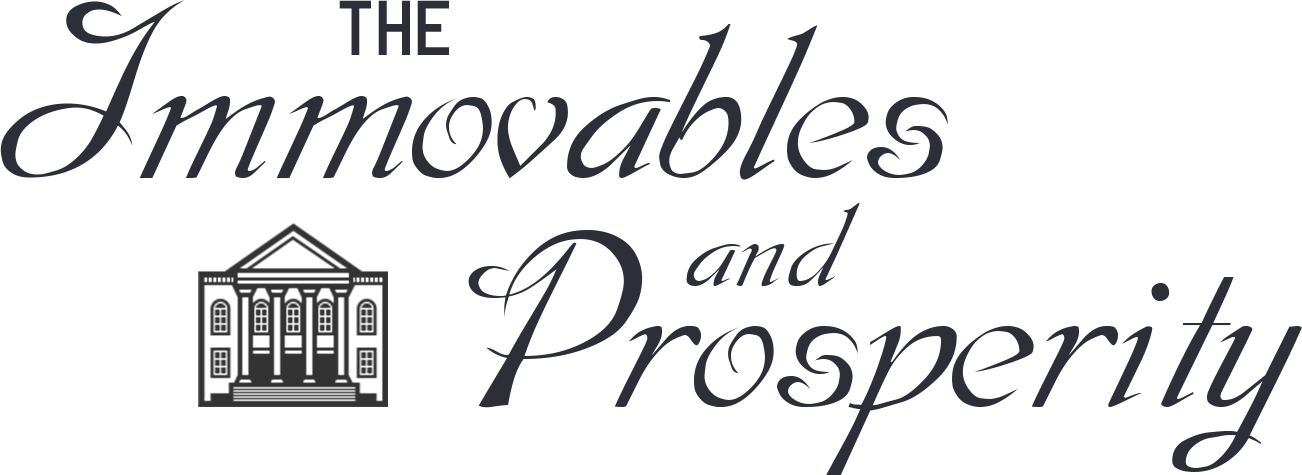
<style>
.page{position:relative;width:1302px;height:475px;background:#ffffff}
.page>*{position:absolute;margin:0}
.t1{font:247px "Dobkin-Plain";color:#2c2e38}
.t2{font:62px "Manteka";color:#2c2e38}
.t3{font:128px "Dobkin-Plain";color:#2c2e38}
</style>
<div class="page">
<p class="t1" style="left:0px;top:0px;width:948px;height:180px">Immovables</p>
<p class="t2" style="left:339px;top:0px;width:110px;height:55px">the</p>
<p class="t3" style="left:686px;top:202px;width:174px;height:84px">and</p>
<p class="t1" style="left:468px;top:230px;width:834px;height:245px">Prosperity</p>
</div>
